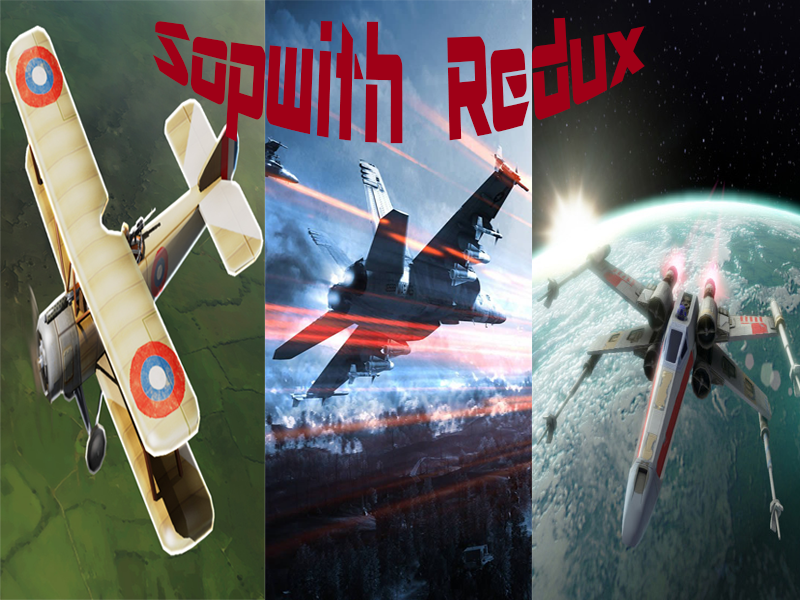
<style>
.page{position:relative;width:800px;height:600px}
.page>*{position:absolute;margin:0}
.t1{font:72px "ARDESTINE";color:#9f0017}
</style>
<div class="page">
<p class="t1" style="left:152px;top:17px;width:493px;height:127px;text-align:center">Sopwith Redux</p>
</div>
